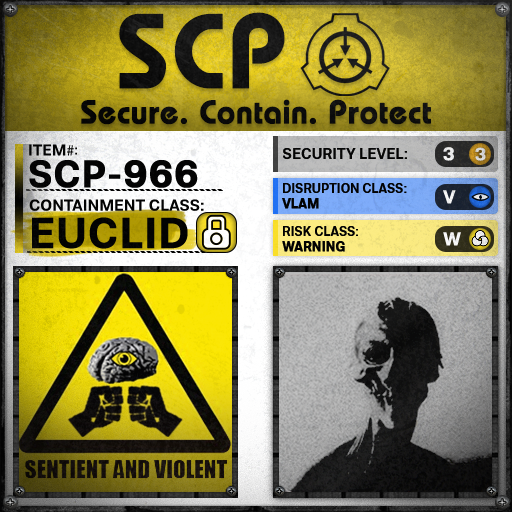
<style>
.page{position:relative;width:512px;height:512px}
.page>*{position:absolute;margin:0}
.t1{font:105.8px "BauhausLT-Demi";color:#000000;font-weight:bold}
.t2{font:33px "BauhausLT-Demi";color:#000000;font-weight:bold}
.t3{font:15.7px "Molde-Semibold";color:#000000}
.t4{font:15.7px "MyriadPro-Regular";color:#000000}
.t5{font:13.7px "Molde-Semibold";color:#000000}
.t6{font:15px "Molde-Semibold";color:#000000}
.t7{font:18.6px "Molde-Semibold";color:#ffffff;font-weight:bold}
.t8{font:17.8px "Molde-Semibold";color:#d6d7d7;font-weight:bold}
.t9{font:38.2px "Molde-Semibold";color:#000000;font-weight:bold}
.t10{font:12.8px "Molde-Semibold";color:#000000}
.t11{font:12.8px "Molde-Semibold";color:#000000;font-weight:bold}
.t12{font:15.9px "Molde-Semibold";color:#000000}
.t13{font:42.8px "Molde-Semibold";color:#000000;font-weight:bold}
</style>
<div class="page">
<p class="t1" style="left:119px;top:12px;width:166px;height:77px">SCP</p>
<p class="t2" style="left:81px;top:99px;width:350px;height:26px">Secure. Contain. Protect</p>
<p class="t3" style="left:29px;top:144px;width:45px;height:12px">ITEM<span class="t4">#</span></p>
<p class="t5" style="left:75px;top:147px;width:2px;height:8px">:</p>
<p class="t6" style="left:283px;top:148px;width:124px;height:11px">SECURITY LEVEL:</p>
<p class="t7" style="left:443px;top:147px;width:11px;height:14px">3</p>
<p class="t8" style="left:475px;top:147px;width:11px;height:14px">3</p>
<p class="t9" style="left:29px;top:160px;width:169px;height:28px">SCP-966</p>
<p class="t10" style="left:282px;top:183px;width:125px;height:26px">DISRUPTION CLASS:<br><span class="t11">VLAM</span></p>
<p class="t7" style="left:443px;top:190px;width:13px;height:14px">V</p>
<p class="t12" style="left:29px;top:199px;width:175px;height:12px">CONTAINMENT CLASS:</p>
<p class="t13" style="left:32px;top:217px;width:156px;height:32px">EUCLID</p>
<p class="t10" style="left:282px;top:226px;width:76px;height:26px">RISK CLASS:<br><span class="t11">WARNING</span></p>
<p class="t7" style="left:443px;top:232px;width:18px;height:14px">W</p>
</div>
